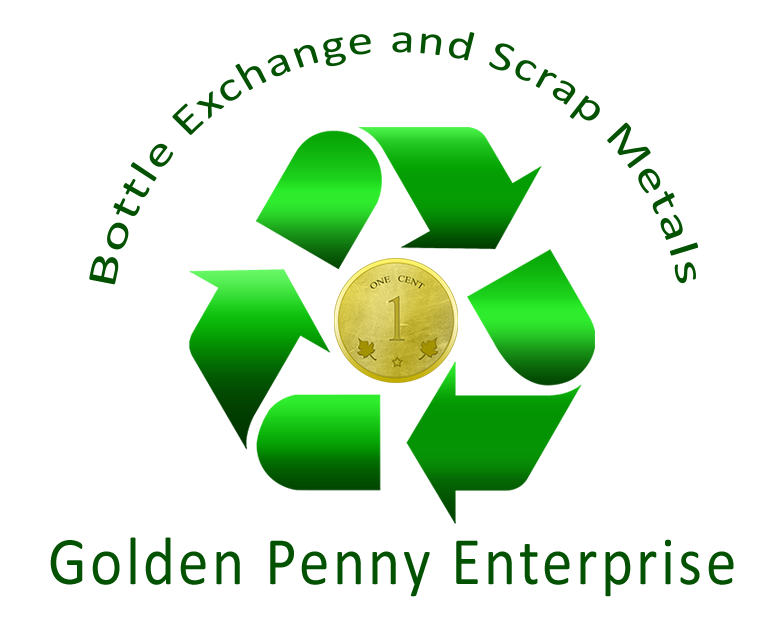
<style>
.page{position:relative;width:783px;height:625px;background:#ffffff}
.page>*{position:absolute;margin:0}
.t1{font:42.2px/121.3px "Calibri";letter-spacing:0.054em;color:#025202;scale:0.83 1}
.t2{font:68.4px "Calibri";letter-spacing:0.054em;color:#025202;scale:0.9 1}
</style>
<div class="page">
<p class="t1" style="left:89px;top:32px;width:610px;height:253px">Bottle Exchange and Scrap Metals</p>
<p class="t2" style="left:50px;top:537px;width:684px;height:60px">Golden Penny Enterprise</p>
</div>
